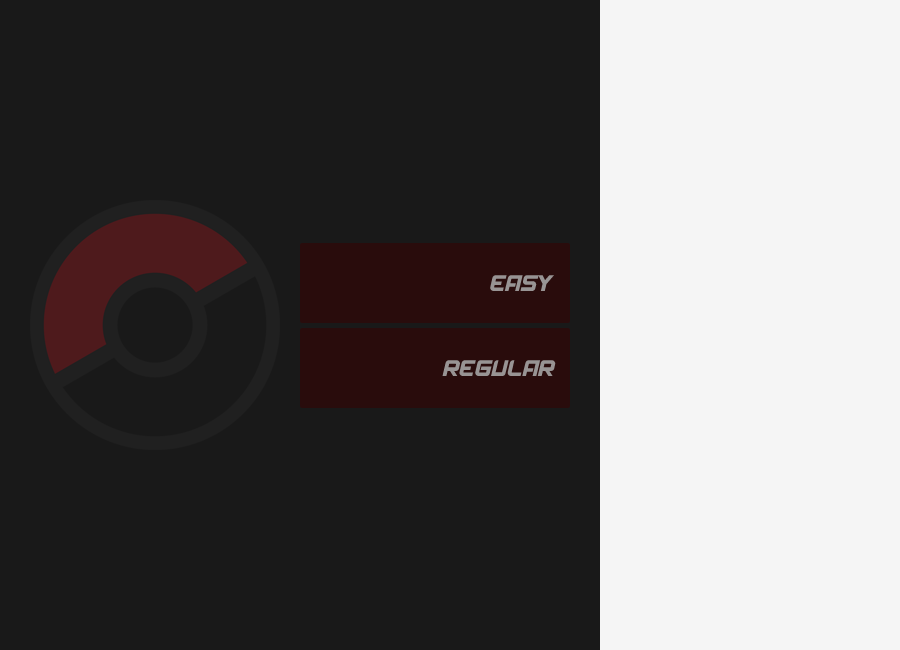
<style>
.page{position:relative;width:900px;height:650px;background:#191919}
.page>*{position:absolute;margin:0}
.t1{font:24px "Spantarandemo";letter-spacing:0.01em;color:#989494}
</style>
<div class="page">
<p class="t1" style="left:490px;top:275px;width:64px;height:16px">EASY</p>
<p class="t1" style="left:442px;top:360px;width:114px;height:16px">REGULAR</p>
</div>
